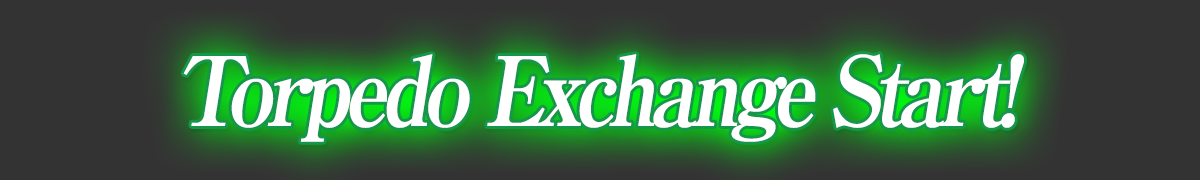
<style>
.page{position:relative;width:1200px;height:180px;background:#333333}
.page>*{position:absolute;margin:0}
.t1{font:96px "RyuminPro-ExBold";letter-spacing:-0.08em;color:#ffffff;font-style:italic;scale:0.9 1}
</style>
<div class="page">
<p class="t1" style="left:183px;top:54px;width:841px;height:88px">Torpedo Exchange Start!</p>
</div>
